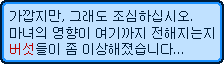
<style>
.page{position:relative;width:224px;height:64px;background:#c0e1ff}
.page>*{position:absolute;margin:0}
.t1{font:12.5px "Gulim";color:#001c37}
.t2{font:12.5px "Gulim";color:#b60000}
</style>
<div class="page">
<p class="t1" style="left:10px;top:10px;width:182px;height:12px">가깝지만, 그래도 조심하십시오.</p>
<p class="t1" style="left:10px;top:27px;width:204px;height:12px">마녀의 영향이 여기까지 전해지는지</p>
<p class="t1" style="left:10px;top:43px;width:173px;height:12px"><span class="t2">버섯</span>들이 좀 이상해졌습니다...</p>
</div>
